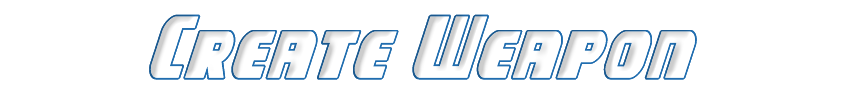
<style>
.page{position:relative;width:850px;height:100px;background:#ffffff}
.page>*{position:absolute;margin:0}
.t1{font:75px "CampJusticeOutlineItalic";color:#206daf}
</style>
<div class="page">
<p class="t1" style="left:149px;top:14px;width:548px;height:66px">Create Weapon</p>
</div>
